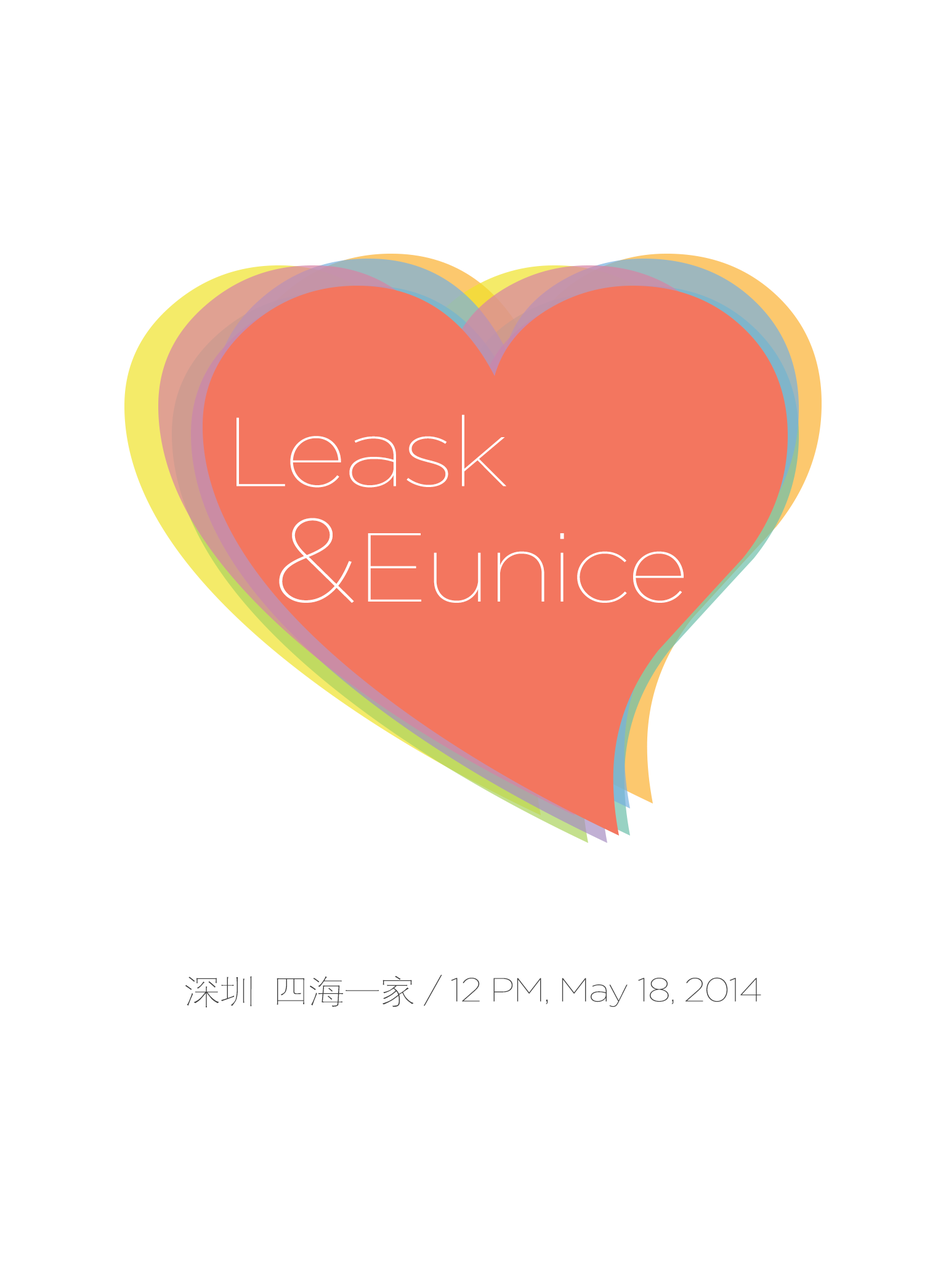
<style>
.page{position:relative;width:946px;height:1261px;background:#ffffff}
.page>*{position:absolute;margin:0}
.t1{font:97.6px "Gotham-Thin";letter-spacing:-0.025em;color:#ffffff;scale:1.1 1}
.t2{font:117.1px "Gotham-Thin";letter-spacing:-0.025em;color:#ffffff;scale:1.1 1}
.t3{font:33.2px "Gotham-Thin";letter-spacing:-0.025em;color:#404040;scale:1.1 1}
.t4{font:33.2px "HYg6gj";letter-spacing:-0.025em;color:#404040;scale:1.1 1}
</style>
<div class="page">
<p class="t1" style="left:236px;top:414px;width:270px;height:74px">Leask</p>
<p class="t2" style="left:279px;top:518px;width:75px;height:85px">&amp;</p>
<p class="t1" style="left:368px;top:533px;width:315px;height:70px">Eunice</p>
<p class="t3" style="left:185px;top:975px;width:576px;height:32px"><span class="t4">深圳 四海一家</span> / 12 PM, May 18, 2014</p>
</div>
